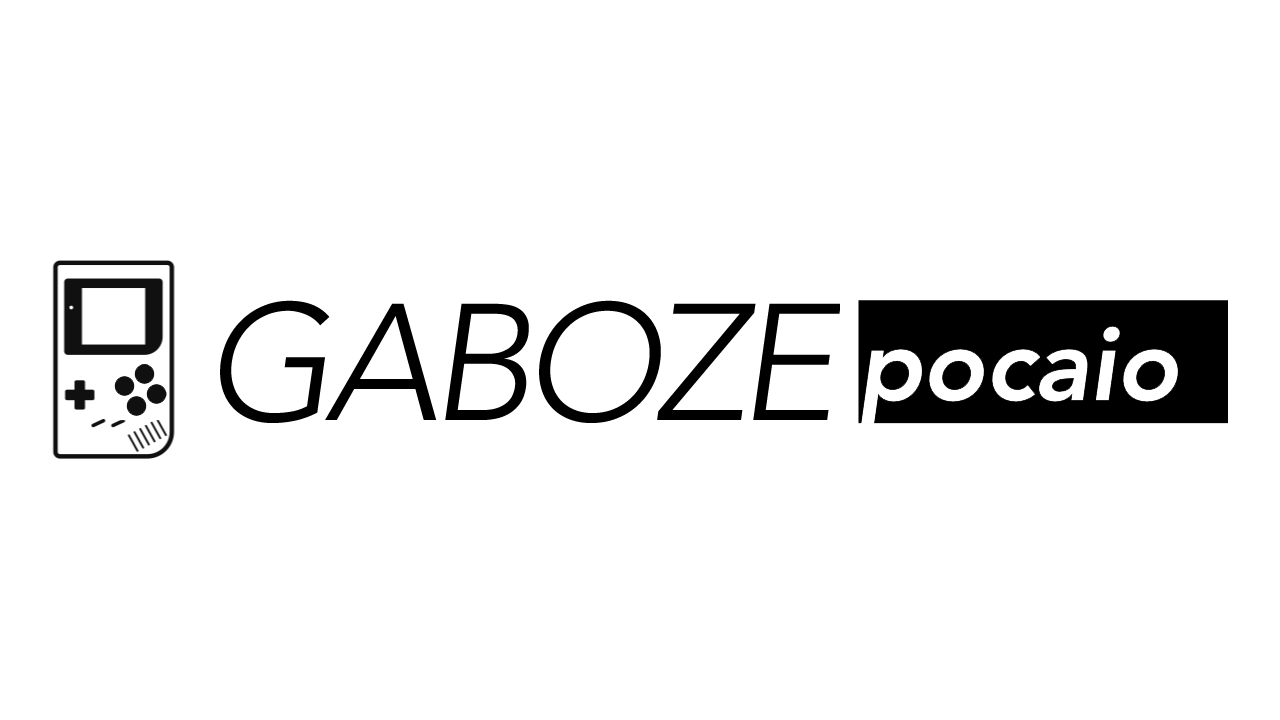
<style>
.page{position:relative;width:1280px;height:720px;background:#ffffff}
.page>*{position:absolute;margin:0}
.t1{font:164px "Avenir-LightOblique";color:#000000}
</style>
<div class="page">
<p class="t1" style="left:220px;top:300px;width:110px;height:123px">G</p>
<p class="t1" style="left:325px;top:303px;width:112px;height:117px">A</p>
<p class="t1" style="left:445px;top:303px;width:84px;height:117px">B</p>
<p class="t1" style="left:539px;top:300px;width:122px;height:123px">O</p>
<p class="t1" style="left:657px;top:303px;width:99px;height:117px">Z</p>
<p class="t1" style="left:753px;top:303px;width:88px;height:117px">E</p>
</div>
